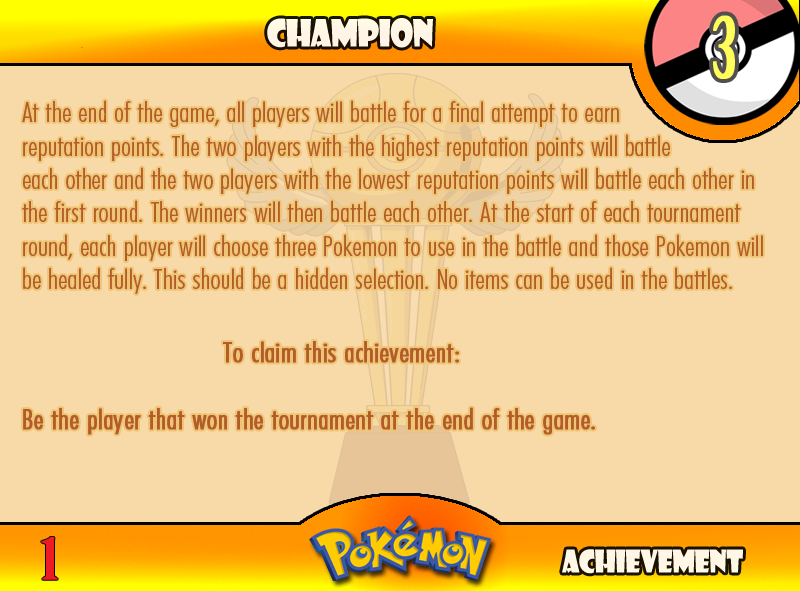
<style>
.page{position:relative;width:800px;height:591px;background:#f8d9a8}
.page>*{position:absolute;margin:0}
.t1{font:83.3px "BirchStd";letter-spacing:0.025em;color:#fffd59;font-weight:bold}
.t2{font:36.7px "ShowcardGothic-Reg";letter-spacing:-0.025em;color:#fff6e6;scale:0.91 1}
.t3{font:27.8px "FuturaCondensedBQ-Light";color:#b15c29;scale:1.08 1}
.t4{font:27.8px "FuturaCondensedBQ-Light";color:#b15c29;font-weight:bold;scale:1.08 1}
.t5{font:55.6px "BirchStd";color:#ed1c24;font-weight:bold;scale:1.5 1}
.t6{font:30.6px "ShowcardGothic-Reg";letter-spacing:-0.025em;color:#fff7e6;scale:0.91 1}
</style>
<div class="page">
<p class="t1" style="left:713px;top:15px;width:22px;height:64px">3</p>
<p class="t2" style="left:267px;top:18px;width:166px;height:30px">Champion</p>
<p class="t3" style="left:22px;top:100px;width:741px;height:335px">At the end of the game, all players will battle for a final attempt to earn <br>reputation points. The two players with the highest reputation points will battle <br>each other and the two players with the lowest reputation points will battle each other in the first round. The winners will then battle each other. At the start of each tournament round, each player will choose three Pokemon to use in the battle and those Pokemon will be healed fully. This should be a hidden selection. No items can be used in the battles.<br><br><span class="t4">       To claim this achievement:<br><br>Be the player that won the tournament at the end of the game.</span></p>
<p class="t5" style="left:41px;top:537px;width:17px;height:43px">1</p>
<p class="t6" style="left:562px;top:549px;width:181px;height:25px">Achievement</p>
</div>
